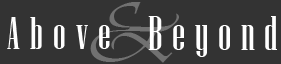
<style>
.page{position:relative;width:281px;height:64px;background:#333333}
.page>*{position:absolute;margin:0}
.t1{font:89.6px "Vivaldi";letter-spacing:0.3em;color:#717171;scale:1.04 1}
.t2{font:46px "NiagaraSolid-Reg";letter-spacing:0.22em;color:#ffffff}
.t3{font:48px "NiagaraSolid-Reg";letter-spacing:0.2em;color:#ffffff}
</style>
<div class="page">
<p class="t1" style="left:90px;top:2px;width:89px;height:61px">&amp;</p>
<p class="t2" style="left:7px;top:17px;width:103px;height:32px">Above</p>
<p class="t3" style="left:148px;top:16px;width:129px;height:41px">Beyond</p>
</div>
